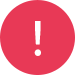
<style>
.page{position:relative;width:75px;height:75px;background:#e83956}
.page>*{position:absolute;margin:0}
.t1{font:50px "Montserrat-Regular";letter-spacing:0.082em;color:#ffffff}
</style>
<div class="page">
<p class="t1" style="left:34px;top:21px;width:7px;height:35px">!</p>
</div>
